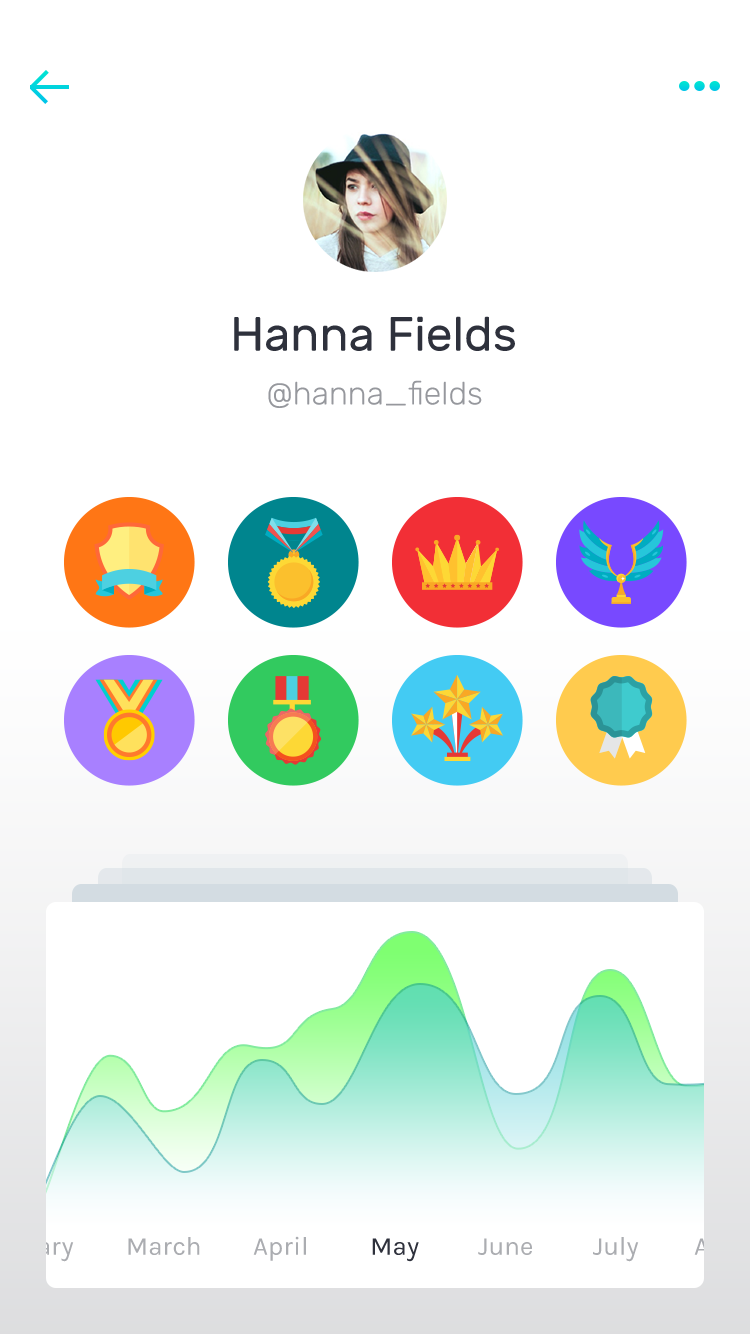
<style>
.page{position:relative;width:750px;height:1334px;background:#ffffff}
.page>*{position:absolute;margin:0}
.t1{font:48px "Rubik-Regular";color:#2e313c}
.t2{font:32px "Rubik-Light";color:#96989d}
.t3{font:26px "Karla-Regular";color:#abadb1}
.t4{font:26px "Karla-Regular";color:#2e313c}
.t5{font:26px "Karla-Regular";color:#e1e1e3}
</style>
<div class="page">
<p class="t1" style="left:234px;top:316px;width:281px;height:35px">Hanna Fields</p>
<p class="t2" style="left:268px;top:380px;width:214px;height:28px">@hanna_fields</p>
<p class="t3" style="left:128px;top:1237px;width:72px;height:18px">March</p>
<p class="t3" style="left:253px;top:1236px;width:53px;height:25px">April</p>
<p class="t4" style="left:372px;top:1238px;width:47px;height:24px">May</p>
<p class="t3" style="left:478px;top:1238px;width:54px;height:17px">June</p>
<p class="t3" style="left:593px;top:1237px;width:46px;height:25px">July</p>
<p class="t5" style="left:694px;top:1238px;width:45px;height:24px">Aug</p>
</div>
